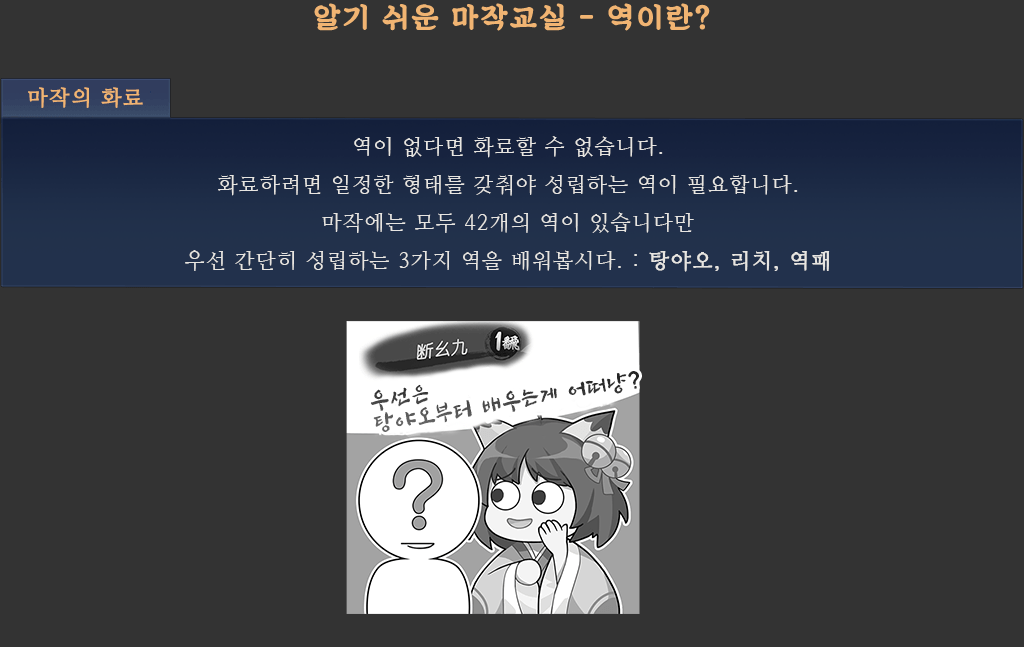
<style>
.page{position:relative;width:1024px;height:647px;background:#333333}
.page>*{position:absolute;margin:0}
.t1{font:29px "SDKukdetopokki-aLt";letter-spacing:0.06em;color:#f1b472;font-weight:bold}
.t2{font:21px "NanumMyeongjo";letter-spacing:0.06em;color:#f1b472;font-weight:bold}
.t3{font:21px/38px "NanumMyeongjo";letter-spacing:0.06em;color:#e7e5e1}
.t4{font:21px/38px "NanumMyeongjo";letter-spacing:0.06em;color:#e7e5e1;font-weight:bold}
.t5{font:23px/22px "SangSangRockOTF";letter-spacing:0.06em}
</style>
<div class="page">
<p class="t1" style="left:314px;top:3px;width:396px;height:28px">알기 쉬운 마작교실 - 역이란?</p>
<p class="t2" style="left:28px;top:87px;width:115px;height:21px">마작의 화료</p>
<p class="t3" style="left:185px;top:136px;width:645px;height:136px;text-align:center">역이 없다면 화료할 수 없습니다.<br>화료하려면 일정한 형태를 갖춰야 성립하는 역이 필요합니다.<br>마작에는 모두 42개의 역이 있습니다만<br>우선 간단히 성립하는 3가지 역을 배워봅시다. : <span class="t4">탕야오, 리치, 역패</span></p>
<p class="t5" style="left:370px;top:371px;width:269px;height:61px;rotate:-10deg">우선은<br>탕야오부터 배우는게 어떠냥?</p>
</div>
